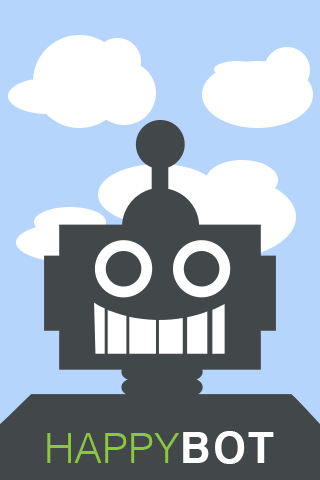
<style>
.page{position:relative;width:320px;height:480px;background:#b5d5fc}
.page>*{position:absolute;margin:0}
.t1{font:41.8px "Helvetica-Light";color:#8dc63f}
.t2{font:41.8px "Helvetica-Bold";letter-spacing:0.06em;color:#ffffff}
</style>
<div class="page">
<p class="t1" style="left:47px;top:431px;width:227px;height:33px">HAPPY<span class="t2">BOT</span></p>
</div>
